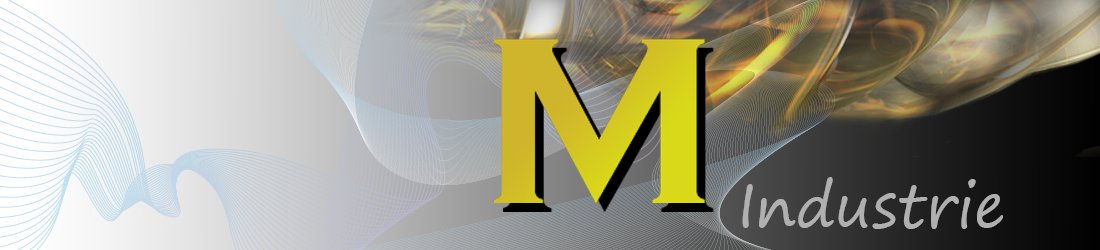
<style>
.page{position:relative;width:1100px;height:250px}
.page>*{position:absolute;margin:0}
.t1{font:60px "SegoePrint";color:#b0b0b0}
</style>
<div class="page">
<p class="t1" style="left:742px;top:177px;width:261px;height:52px">Industrie</p>
</div>
